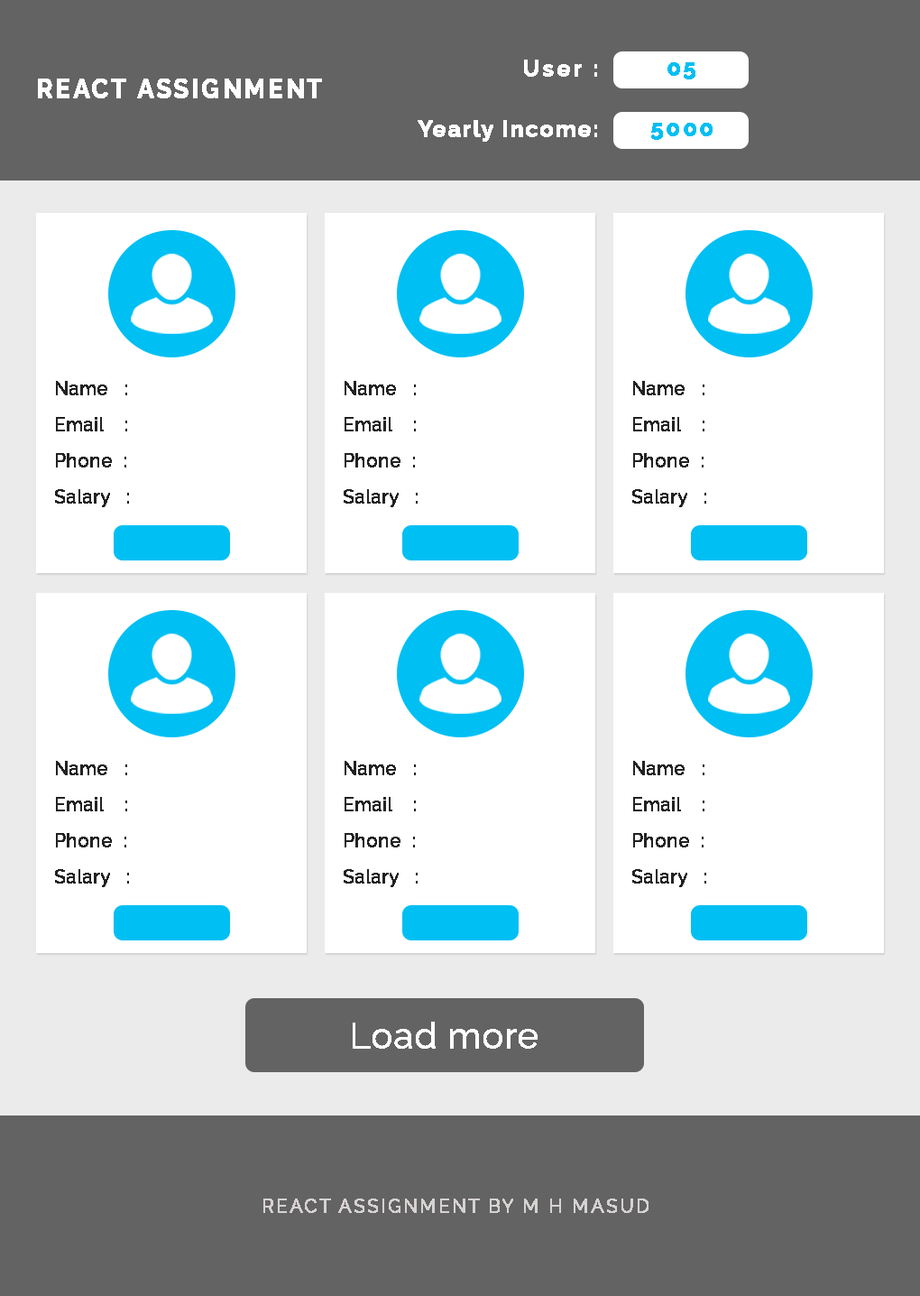
<style>
.page{position:relative;width:920px;height:1296px;background:#ffffff}
.page>*{position:absolute;margin:0}
.t1{font:22.6px "Raleway-Bold";letter-spacing:0.1em;color:#ffffff;font-weight:bold}
.t2{font:22.6px "Raleway-Bold";letter-spacing:0.1em;color:#00bff3;font-weight:bold}
.t3{font:27.1px "Raleway-Bold";letter-spacing:0.1em;color:#ffffff;text-transform:uppercase;font-weight:bold;scale:0.89 1}
.t4{font:22.6px "Raleway-Bold";letter-spacing:0.04em;color:#ffffff;font-weight:bold}
.t5{font:18px/36.1px "Raleway-Regular";color:#222222;font-weight:bold}
.t6{font:36.1px "Raleway-Regular";color:#ffffff;font-weight:bold}
.t7{font:18px "Raleway-Regular";letter-spacing:0.1em;color:#d7d2d2;text-transform:uppercase;font-weight:bold}
</style>
<div class="page">
<p class="t1" style="left:524px;top:60px;width:73px;height:17px">User :</p>
<p class="t2" style="left:668px;top:62px;width:28px;height:17px">05</p>
<p class="t3" style="left:38px;top:78px;width:284px;height:20px">React Assignment</p>
<p class="t4" style="left:418px;top:120px;width:179px;height:22px">Yearly Income:</p>
<p class="t2" style="left:651px;top:123px;width:62px;height:17px">5000</p>
<p class="t5" style="left:55px;top:381px;width:74px;height:126px">Name   : Email    :<br>Phone  : Salary   :</p>
<p class="t5" style="left:344px;top:381px;width:74px;height:126px">Name   : Email    :<br>Phone  : Salary   :</p>
<p class="t5" style="left:632px;top:381px;width:74px;height:126px">Name   : Email    :<br>Phone  : Salary   :</p>
<p class="t5" style="left:55px;top:761px;width:74px;height:126px">Name   : Email    :<br>Phone  : Salary   :</p>
<p class="t5" style="left:344px;top:761px;width:74px;height:126px">Name   : Email    :<br>Phone  : Salary   :</p>
<p class="t5" style="left:632px;top:761px;width:74px;height:126px">Name   : Email    :<br>Phone  : Salary   :</p>
<p class="t6" style="left:353px;top:1021px;width:185px;height:27px">Load more</p>
<p class="t7" style="left:263px;top:1198px;width:386px;height:15px">React assignment by M H Masud</p>
</div>
